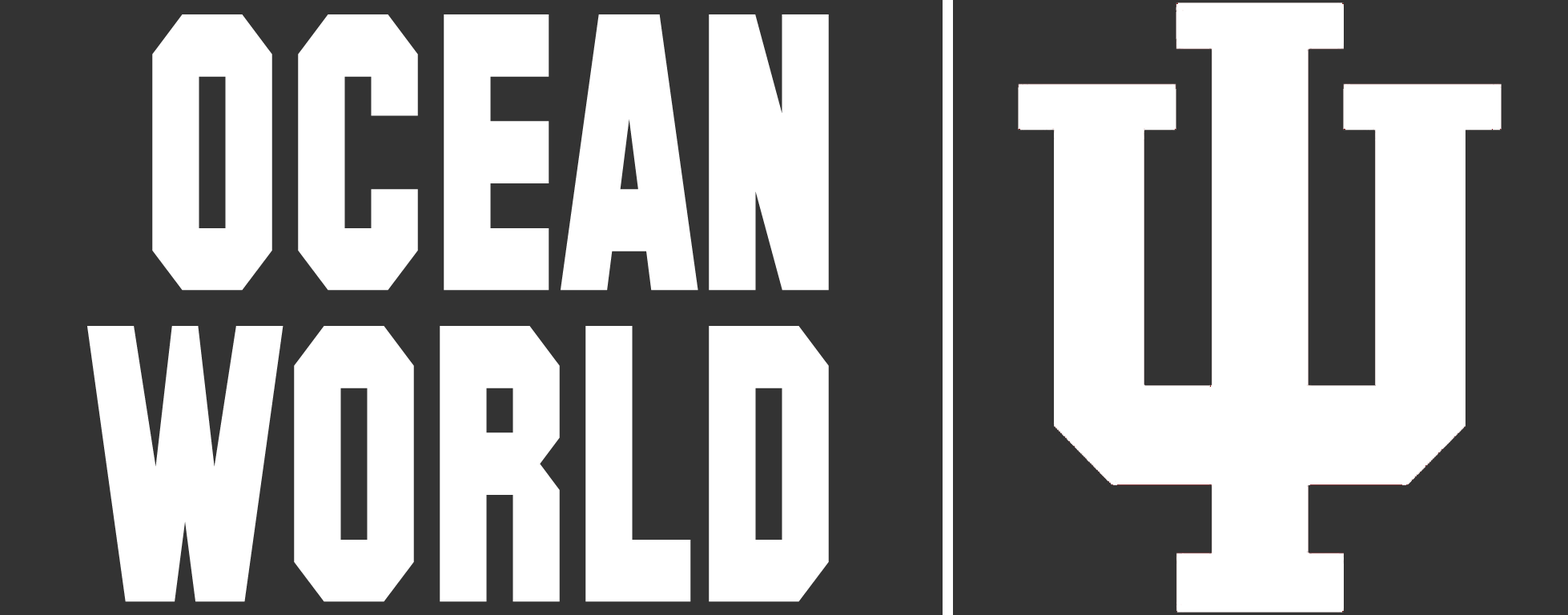
<style>
.page{position:relative;width:1568px;height:615px;background:#333333}
.page>*{position:absolute;margin:0}
.t1{font:388.4px/11.5px "SFCollegiateSolid-Bold";color:#ffffff}
</style>
<div class="page">
<p class="t1" style="left:87px;top:14px;width:742px;height:588px;text-align:right">OCEAN<br><br><br><br><br><br><br><br><br><br><br><br><br><br><br><br><br><br><br><br><br><br><br><br><br><br><br>WORLD</p>
</div>
